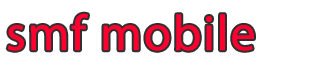
<style>
.page{position:relative;width:311px;height:67px;background:#ffffff}
.page>*{position:absolute;margin:0}
.t1{font:50px "MyriadPro-Regular";letter-spacing:0.01em;color:#fe0030;font-weight:bold}
</style>
<div class="page">
<p class="t1" style="left:7px;top:13px;width:247px;height:38px">smf mobile</p>
</div>
